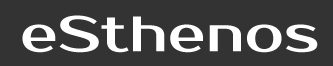
<style>
.page{position:relative;width:333px;height:66px;background:#333333}
.page>*{position:absolute;margin:0}
.t1{font:49.8px "ProstoOne-Regular";color:#ffffff;scale:1.14 1}
</style>
<div class="page">
<p class="t1" style="left:22px;top:15px;width:296px;height:38px">eSthenos</p>
</div>
